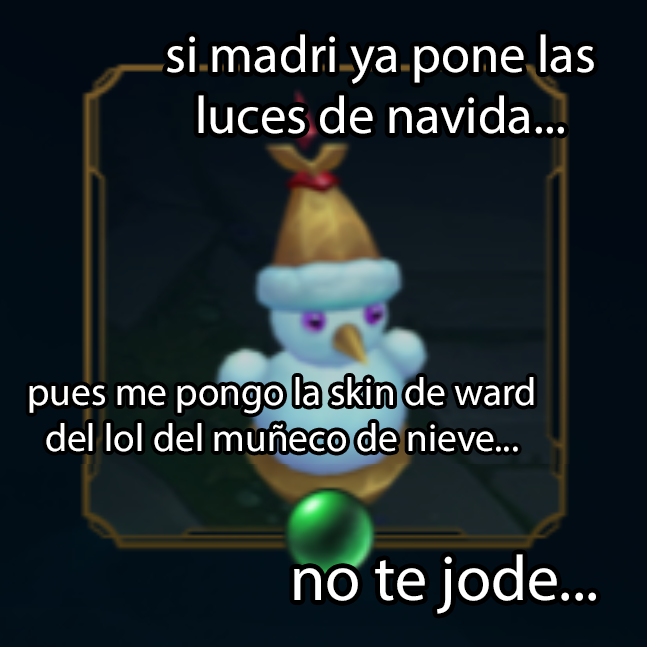
<style>
.page{position:relative;width:647px;height:647px}
.page>*{position:absolute;margin:0}
.t1{font:52.8px "MyriadPro-Regular";color:#ffffff}
.t2{font:39.3px "MyriadPro-Regular";color:#ffffff}
.t3{font:64px "MyriadPro-Regular";color:#ffffff}
</style>
<div class="page">
<p class="t1" style="left:167px;top:34px;width:427px;height:100px;text-align:center">si madri ya pone las<br>luces de navida...</p>
<p class="t2" style="left:29px;top:377px;width:505px;height:75px;text-align:center">pues me pongo la skin de ward<br>del lol del muñeco de nieve...</p>
<p class="t3" style="left:294px;top:554px;width:302px;height:60px">no te jode...</p>
</div>
